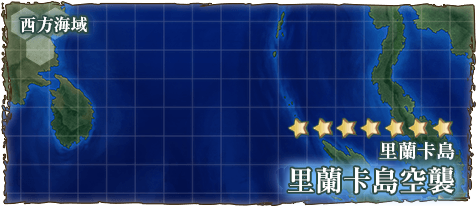
<style>
.page{position:relative;width:476px;height:206px}
.page>*{position:absolute;margin:0}
.t1{font:17px "RyuminPr6N-ExBold";color:#ffffff}
.t2{font:19px "RyuminPro-ExBold";color:#ffffff}
.t3{font:28px "RyuminPro-ExBold";color:#ffffff}
</style>
<div class="page">
<p class="t1" style="left:20px;top:16px;width:67px;height:17px">西方海域</p>
<p class="t2" style="left:379px;top:141px;width:76px;height:19px">里蘭卡島</p>
<p class="t3" style="left:288px;top:167px;width:166px;height:27px">里蘭卡島空襲</p>
</div>
